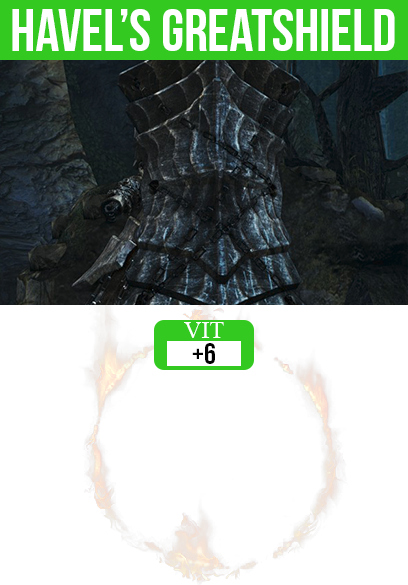
<style>
.page{position:relative;width:408px;height:585px;background:#ffffff}
.page>*{position:absolute;margin:0}
.t1{font:59px "BebasNeue";color:#ffffff}
.t2{font:24px "TimesNewRomanPSMT";color:#ffffff}
.t3{font:30px "BebasNeue";color:#000000}
</style>
<div class="page">
<p class="t1" style="left:12px;top:9px;width:383px;height:42px">havel’s greatshield</p>
<p class="t2" style="left:184px;top:322px;width:40px;height:16px">VIT</p>
<p class="t3" style="left:192px;top:343px;width:23px;height:21px">+6</p>
</div>
